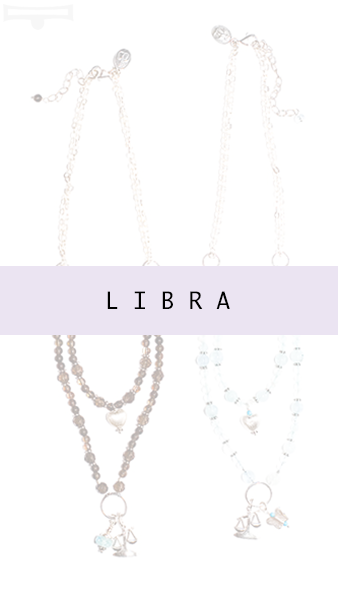
<style>
.page{position:relative;width:338px;height:600px;background:#ffffff}
.page>*{position:absolute;margin:0}
.t1{font:23.3px "Ayuthaya";color:#000000}
</style>
<div class="page">
<p class="t1" style="left:107px;top:291px;width:123px;height:18px">L I B R A</p>
</div>
